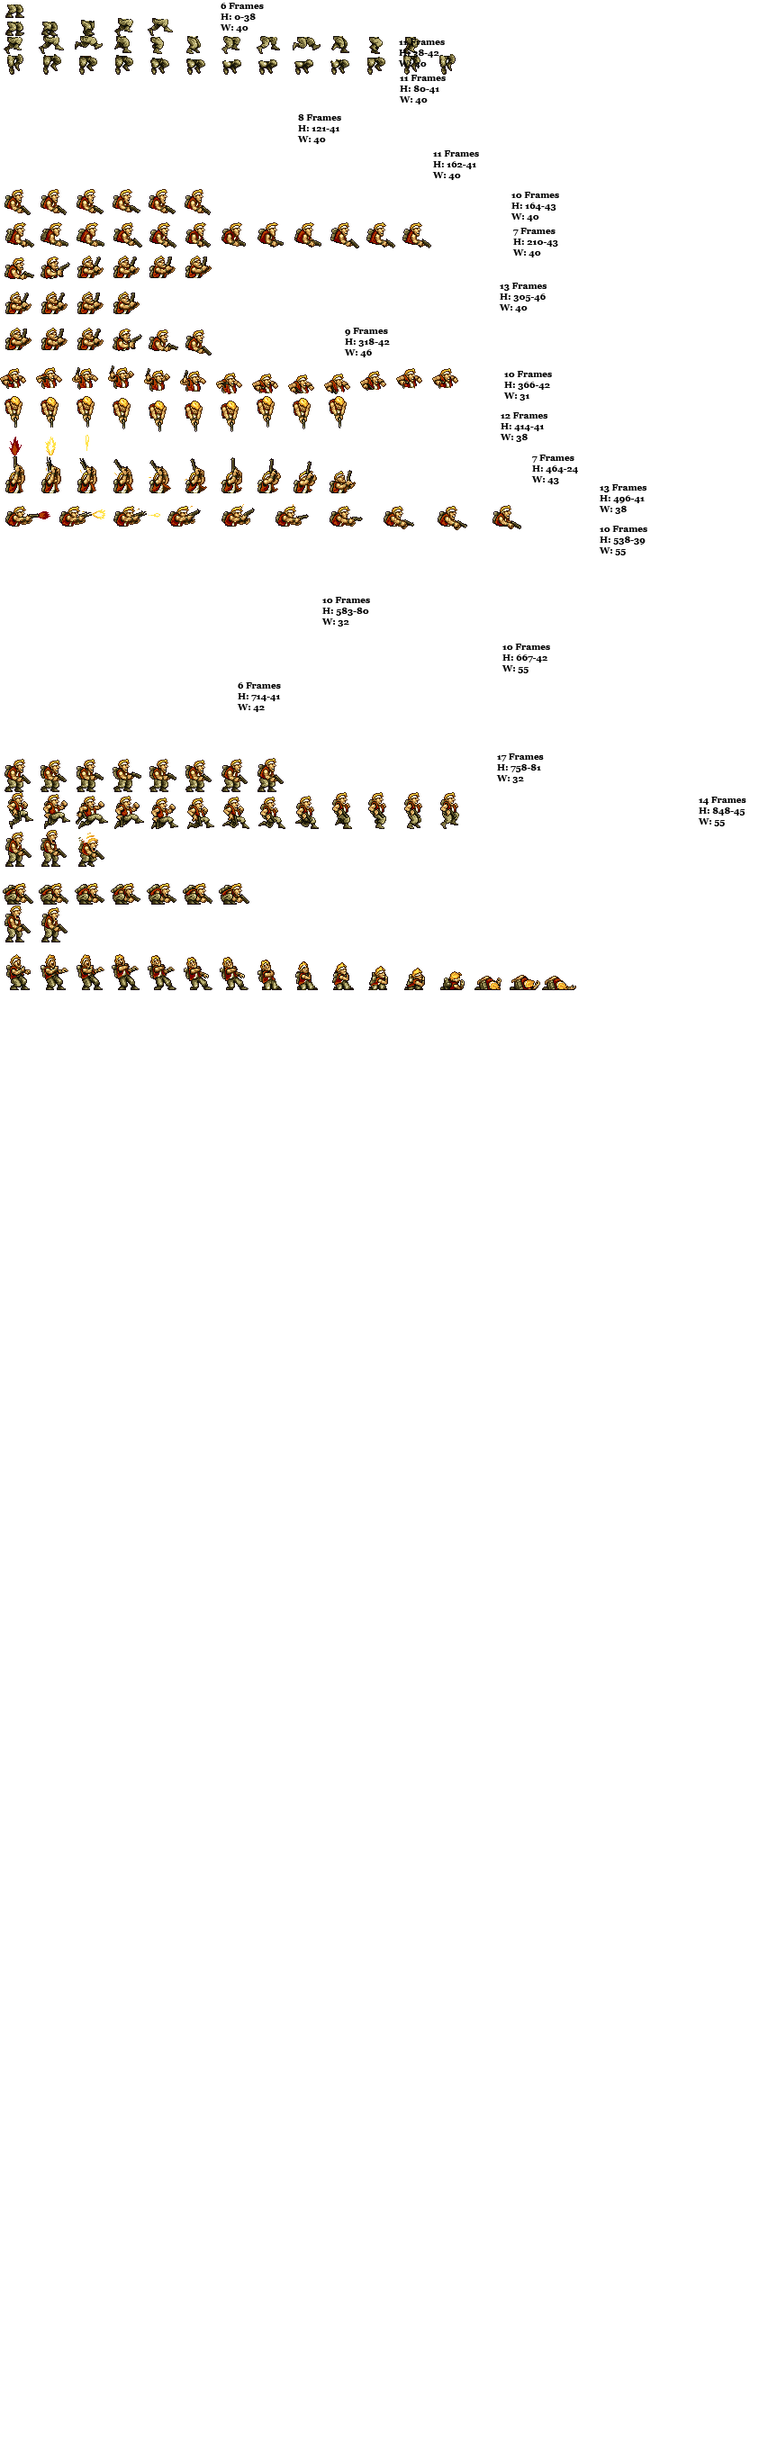
<style>
.page{position:relative;width:768px;height:2443px;background:#ffffff}
.page>*{position:absolute;margin:0}
.t1{font:9px "Vani-Bold";color:#000000}
</style>
<div class="page">
<p class="t1" style="left:220px;top:3px;width:44px;height:29px">6 Frames<br>H: 0-38<br>W: 40</p>
<p class="t1" style="left:398px;top:39px;width:47px;height:29px">11 Frames<br>H: 38-42<br>W: 40</p>
<p class="t1" style="left:399px;top:75px;width:47px;height:29px">11 Frames<br>H: 80-41<br>W: 40</p>
<p class="t1" style="left:297px;top:114px;width:44px;height:30px">8 Frames<br>H: 121-41<br>W: 40</p>
<p class="t1" style="left:432px;top:150px;width:47px;height:30px">11 Frames<br>H: 162-41<br>W: 40</p>
<p class="t1" style="left:510px;top:192px;width:49px;height:29px">10 Frames<br>H: 164-43<br>W: 40</p>
<p class="t1" style="left:512px;top:228px;width:46px;height:29px">7 Frames<br>H: 210-43<br>W: 40</p>
<p class="t1" style="left:499px;top:283px;width:48px;height:29px">13 Frames<br>H: 305-46<br>W: 40</p>
<p class="t1" style="left:344px;top:328px;width:46px;height:29px">9 Frames<br>H: 318-42<br>W: 46</p>
<p class="t1" style="left:503px;top:371px;width:49px;height:29px">10 Frames<br>H: 366-42<br>W: 31</p>
<p class="t1" style="left:500px;top:412px;width:48px;height:30px">12 Frames<br>H: 414-41<br>W: 38</p>
<p class="t1" style="left:531px;top:454px;width:47px;height:30px">7 Frames<br>H: 464-24<br>W: 43</p>
<p class="t1" style="left:598px;top:484px;width:49px;height:30px">13 Frames<br>H: 496-41<br>W: 38</p>
<p class="t1" style="left:598px;top:526px;width:49px;height:29px">10 Frames<br>H: 538-39<br>W: 55</p>
<p class="t1" style="left:321px;top:597px;width:49px;height:29px">10 Frames<br>H: 583-80<br>W: 32</p>
<p class="t1" style="left:501px;top:644px;width:49px;height:29px">10 Frames<br>H: 667-42<br>W: 55</p>
<p class="t1" style="left:237px;top:682px;width:44px;height:30px">6 Frames<br>H: 714-41<br>W: 42</p>
<p class="t1" style="left:496px;top:753px;width:48px;height:30px">17 Frames<br>H: 758-81<br>W: 32</p>
<p class="t1" style="left:698px;top:796px;width:48px;height:30px">14 Frames<br>H: 848-45<br>W: 55</p>
</div>
